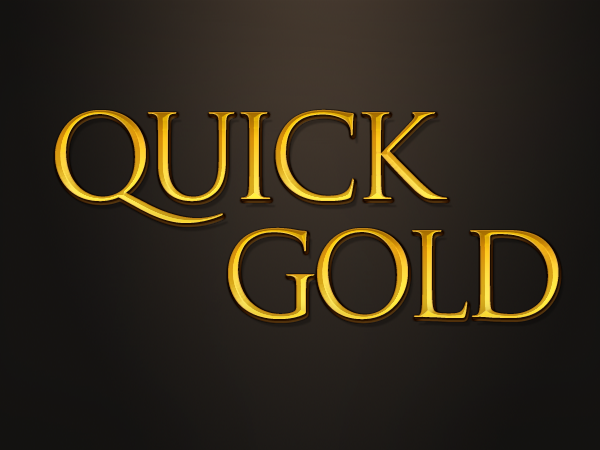
<style>
.page{position:relative;width:600px;height:450px}
.page>*{position:absolute;margin:0}
.t1{font:115.4px "TrajanPro-Regular";letter-spacing:-0.09em}
</style>
<div class="page">
<p class="t1" style="left:55px;top:109px;width:393px;height:114px">QUICK</p>
<p class="t1" style="left:56px;top:111px;width:393px;height:114px">QUICK</p>
<p class="t1" style="left:228px;top:227px;width:331px;height:93px">GOLD</p>
<p class="t1" style="left:229px;top:229px;width:331px;height:93px">GOLD</p>
</div>
